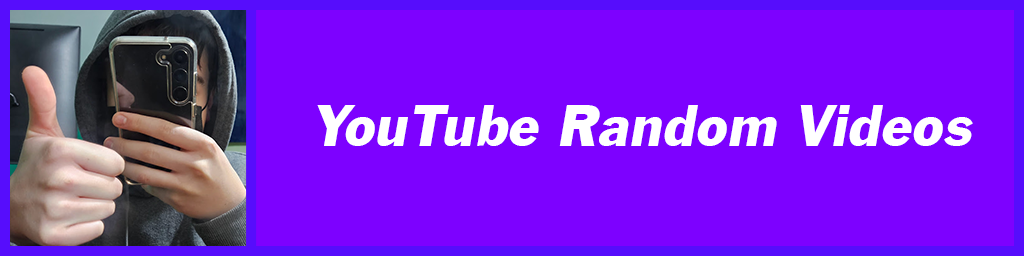
<style>
.page{position:relative;width:1024px;height:256px;background:#7d01ff}
.page>*{position:absolute;margin:0}
.t1{font:61.1px "FranklinGothicITALIC";color:#ffffff}
</style>
<div class="page">
<p class="t1" style="left:317px;top:105px;width:656px;height:41px">YouTube Random Videos</p>
</div>
